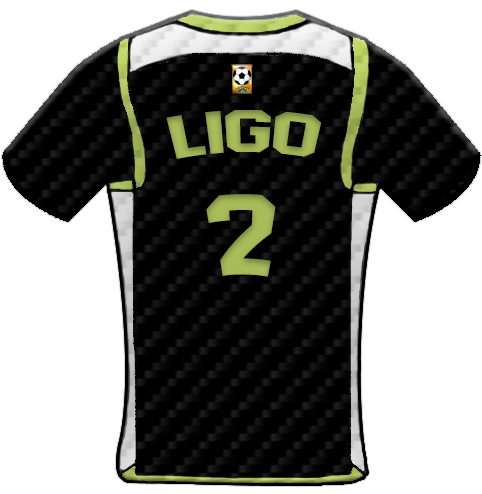
<style>
.page{position:relative;width:482px;height:494px;background:#ffffff}
.page>*{position:absolute;margin:0}
.t1{font:59.4px "AdidasHalfBlock2016";color:#a9bc59;scale:1.13 1}
.t2{font:113.8px "AdidasHalfBlock2016";color:#a9bc59}
</style>
<div class="page">
<p class="t1" style="left:166px;top:110px;width:156px;height:49px">Ligo</p>
<p class="t2" style="left:206px;top:194px;width:70px;height:83px">2</p>
</div>
